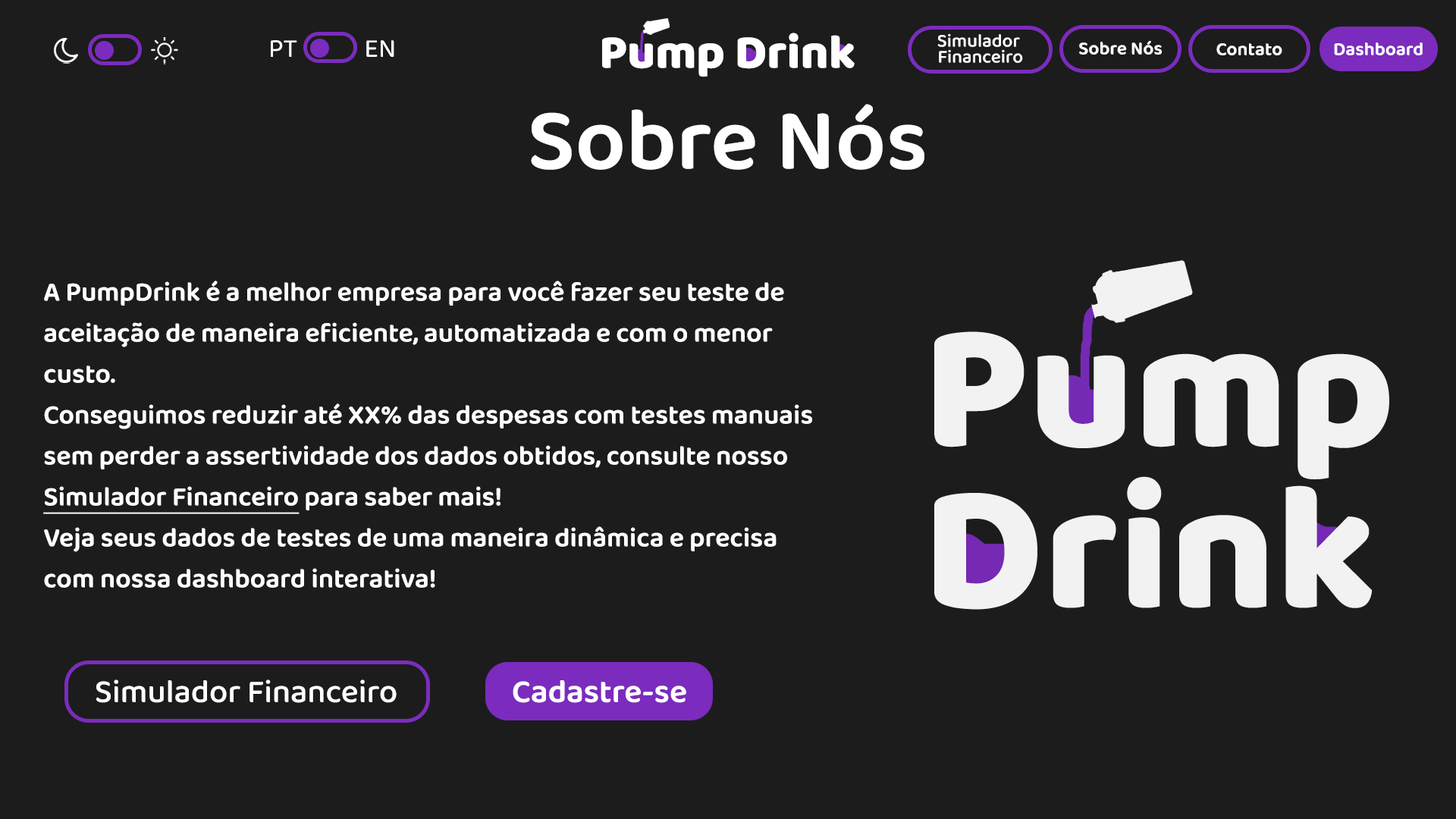
<style>
.page{position:relative;width:1456px;height:819px;background:#1c1c1c}
.page>*{position:absolute;margin:0}
.t1{font:26.5px "Baloo2-Regular";color:#ffffff}
.t2{font:48.4px "Baloo2-ExtraBold";color:#ffffff}
.t3{font:18.6px/15.9px "Baloo2-Medium";color:#ffffff}
.t4{font:18.6px "Baloo2-SemiBold";color:#ffffff}
.t5{font:18.7px "Baloo2-SemiBold";color:#ffffff}
.t6{font:89.1px "Baloo2-SemiBold";color:#ffffff}
.t7{font:27.3px/40.9px "Baloo2-SemiBold";color:#ffffff}
.t8{font:27.3px/40.9px "Baloo2-SemiBold";color:#ffffff;text-decoration:underline}
.t9{font:182px "Baloo2-ExtraBold";color:#ffffff}
.t10{font:32.9px "Baloo2-Medium";color:#ffffff}
.t11{font:32.9px "Baloo2-SemiBold";color:#ffffff}
</style>
<div class="page">
<p class="t1" style="left:271px;top:40px;width:26px;height:17px">PT</p>
<p class="t1" style="left:366px;top:40px;width:28px;height:18px">EN</p>
<p class="t2" style="left:602px;top:33px;width:253px;height:44px">Pump Drink</p>
<p class="t3" style="left:937px;top:33px;width:86px;height:30px;text-align:center">Simulador <br>Financeiro</p>
<p class="t4" style="left:1079px;top:40px;width:83px;height:15px">Sobre Nós</p>
<p class="t5" style="left:1216px;top:43px;width:66px;height:12px">Contato</p>
<p class="t5" style="left:1334px;top:42px;width:89px;height:13px">Dashboard</p>
<p class="t6" style="left:531px;top:104px;width:393px;height:66px">Sobre Nós</p>
<p class="t7" style="left:43px;top:281px;width:769px;height:307px">A PumpDrink é a melhor empresa para você fazer seu teste de <br>aceitação de maneira eficiente, automatizada e com o menor<br>custo.<br>Conseguimos reduzir até XX% das despesas com testes manuais<br>sem perder a assertividade dos dados obtidos, consulte nosso<br><span class="t8">Simulador Financeiro</span> para saber mais!<br>Veja seus dados de testes de uma maneira dinâmica e precisa<br>com nossa dashboard interativa!</p>
<p class="t9" style="left:934px;top:331px;width:455px;height:149px">Pump</p>
<p class="t9" style="left:934px;top:476px;width:439px;height:134px">Drink</p>
<p class="t10" style="left:96px;top:679px;width:301px;height:24px">Simulador Financeiro</p>
<p class="t11" style="left:513px;top:680px;width:173px;height:23px">Cadastre-se</p>
</div>
